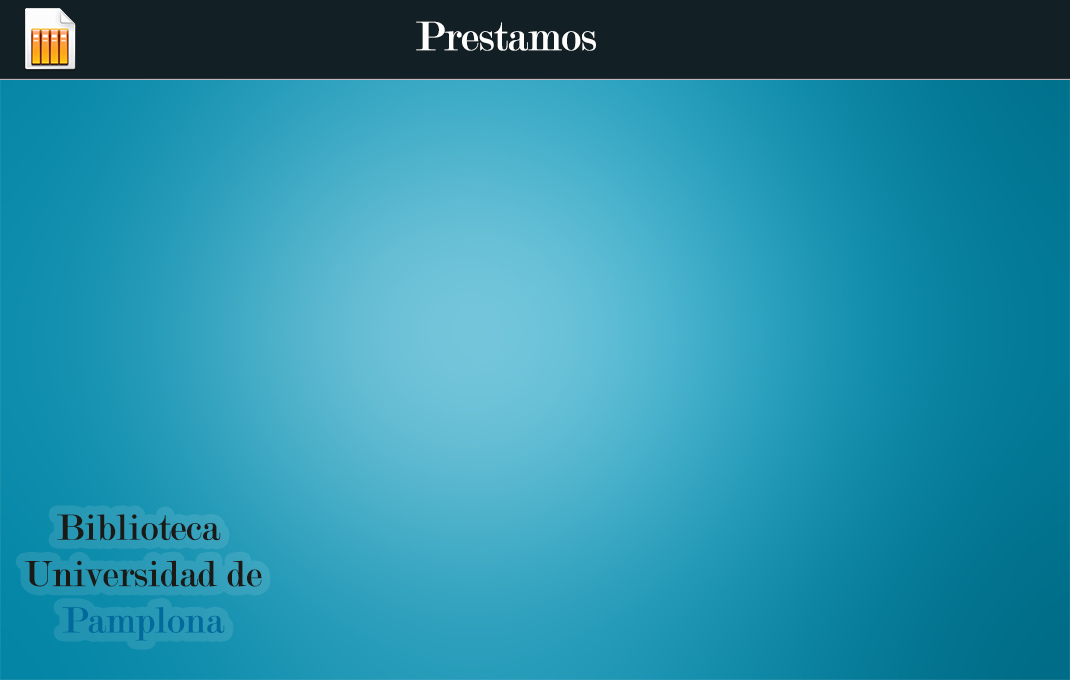
<style>
.page{position:relative;width:1070px;height:680px}
.page>*{position:absolute;margin:0}
.t1{font:43.8px "Modern-Regular";color:#ffffff}
.t2{font:38.6px "Modern-Regular";color:#1b1a17}
.t3{font:38.6px "Modern-Regular";color:#006a9c}
</style>
<div class="page">
<p class="t1" style="left:416px;top:21px;width:180px;height:30px">Prestamos</p>
<p class="t2" style="left:24px;top:514px;width:238px;height:127px;text-align:center">Biblioteca <br>Universidad de<br><span class="t3">Pamplona</span></p>
</div>
